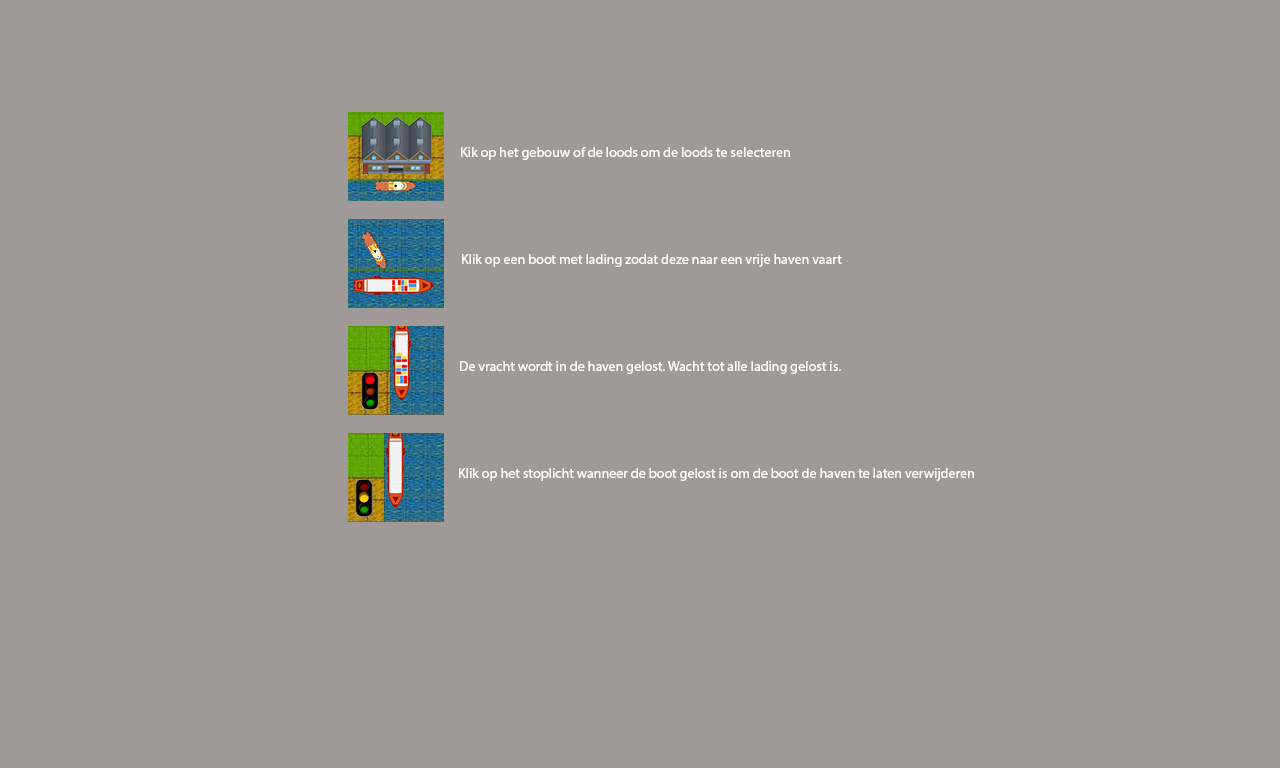
<style>
.page{position:relative;width:1280px;height:768px;background:#9f9a98}
.page>*{position:absolute;margin:0}
.t1{font:14px "MyriadPro-Regular";color:#ffffff}
</style>
<div class="page">
<p class="t1" style="left:461px;top:147px;width:329px;height:13px">Kik op het gebouw of de loods om de loods te selecteren</p>
<p class="t1" style="left:462px;top:254px;width:380px;height:13px">Klik op een boot met lading zodat deze naar een vrije haven vaart</p>
<p class="t1" style="left:460px;top:361px;width:381px;height:13px">De vracht wordt in de haven gelost. Wacht tot alle lading gelost is.</p>
<p class="t1" style="left:459px;top:468px;width:515px;height:13px">Klik op het stoplicht wanneer de boot gelost is om de boot de haven te laten verwijderen</p>
</div>
